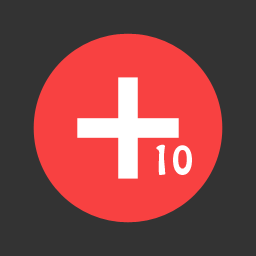
<style>
.page{position:relative;width:256px;height:256px;background:#333333}
.page>*{position:absolute;margin:0}
.t1{font:36px "HoboStd";color:#ffffff}
</style>
<div class="page">
<p class="t1" style="left:156px;top:144px;width:36px;height:31px">10</p>
</div>
